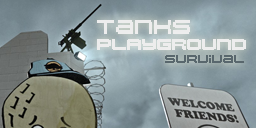
<style>
.page{position:relative;width:256px;height:128px}
.page>*{position:absolute;margin:0}
.t1{font:14px "04b20";color:#ededed}
.t2{font:11px "04b20";color:#ededed}
.t3{font:8px "04b20";color:#59676d}
</style>
<div class="page">
<p class="t1" style="left:97px;top:20px;width:93px;height:14px">TanKs</p>
<p class="t2" style="left:97px;top:39px;width:149px;height:11px">pLAyGRounD</p>
<p class="t3" style="left:165px;top:55px;width:79px;height:8px">SuRvivaL</p>
</div>
